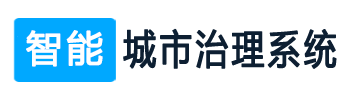
<style>
.page{position:relative;width:350px;height:100px;background:#ffffff}
.page>*{position:absolute;margin:0}
.t1{font:36px "MicrosoftYaHei";letter-spacing:0.1em;color:#ffffff;font-weight:bold}
.t2{font:40px "MicrosoftYaHei";letter-spacing:0.1em;color:#0d1f32;font-weight:bold;scale:0.8 1}
</style>
<div class="page">
<p class="t1" style="left:26px;top:30px;width:77px;height:37px">智能</p>
<p class="t2" style="left:123px;top:28px;width:214px;height:41px">城市治理系统</p>
</div>
